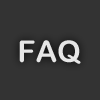
<style>
.page{position:relative;width:100px;height:100px;background:#333333}
.page>*{position:absolute;margin:0}
.t1{font:29.9px "ArialRoundedMTBold";color:#e6e6e6}
</style>
<div class="page">
<p class="t1" style="left:19px;top:40px;width:62px;height:24px">FAQ</p>
</div>
